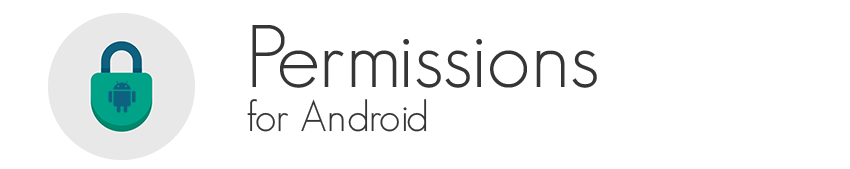
<style>
.page{position:relative;width:850px;height:169px;background:#ffffff}
.page>*{position:absolute;margin:0}
.t1{font:87px "GeosansLight";color:#353535}
.t2{font:42.7px "GeosansLight";color:#353535}
</style>
<div class="page">
<p class="t1" style="left:252px;top:25px;width:345px;height:63px">Permissions</p>
<p class="t2" style="left:247px;top:99px;width:180px;height:33px">for Android</p>
</div>
